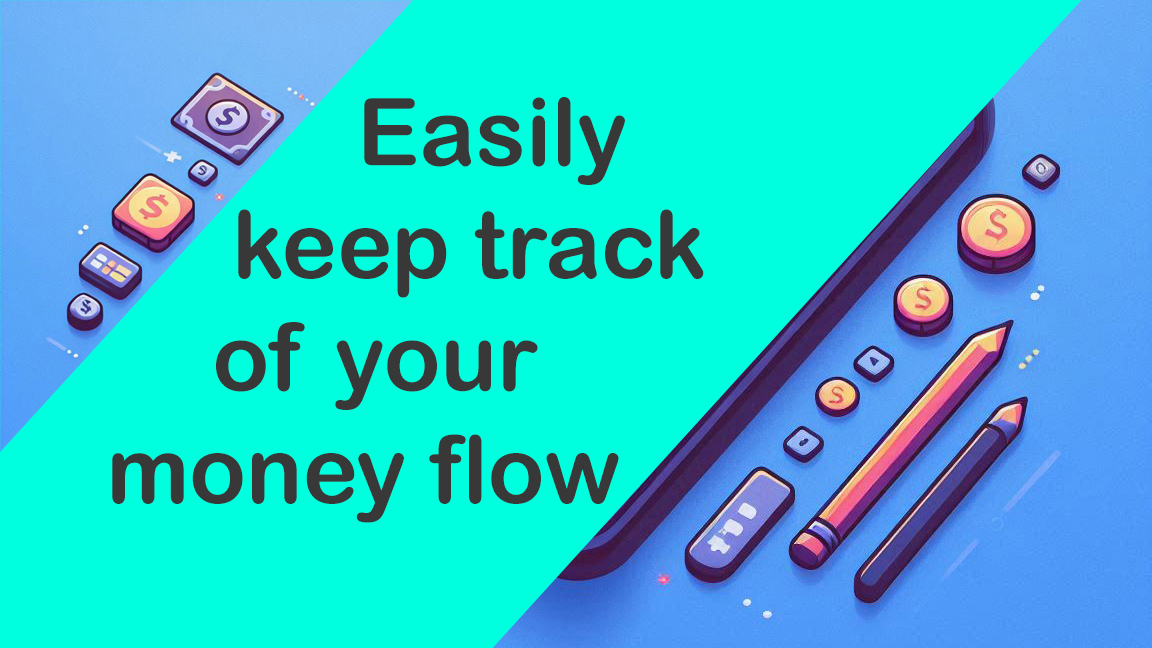
<style>
.page{position:relative;width:1152px;height:648px;background:#00ffde}
.page>*{position:absolute;margin:0}
.t1{font:93.7px "ArialRoundedMTBold";color:#383838}
</style>
<div class="page">
<p class="t1" style="left:112px;top:97px;width:592px;height:426px;text-align:center">Easily <br>          keep track <br>  of your <br>money flow</p>
</div>
